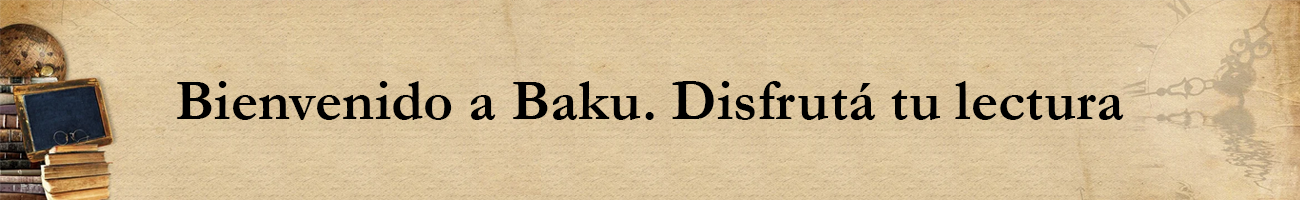
<style>
.page{position:relative;width:1300px;height:200px}
.page>*{position:absolute;margin:0}
.t1{font:58.4px "Garamond-Bold";color:#000000}
</style>
<div class="page">
<p class="t1" style="left:177px;top:81px;width:947px;height:39px">Bienvenido a Baku. Disfrutá tu lectura</p>
</div>
